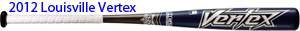
<style>
.page{position:relative;width:300px;height:31px;background:#ffffff}
.page>*{position:absolute;margin:0}
.t1{font:14px "MyriadPro-Regular";color:#0000ff}
</style>
<div class="page">
<p class="t1" style="left:9px;top:2px;width:127px;height:10px">2012 Louisville Vertex</p>
</div>
